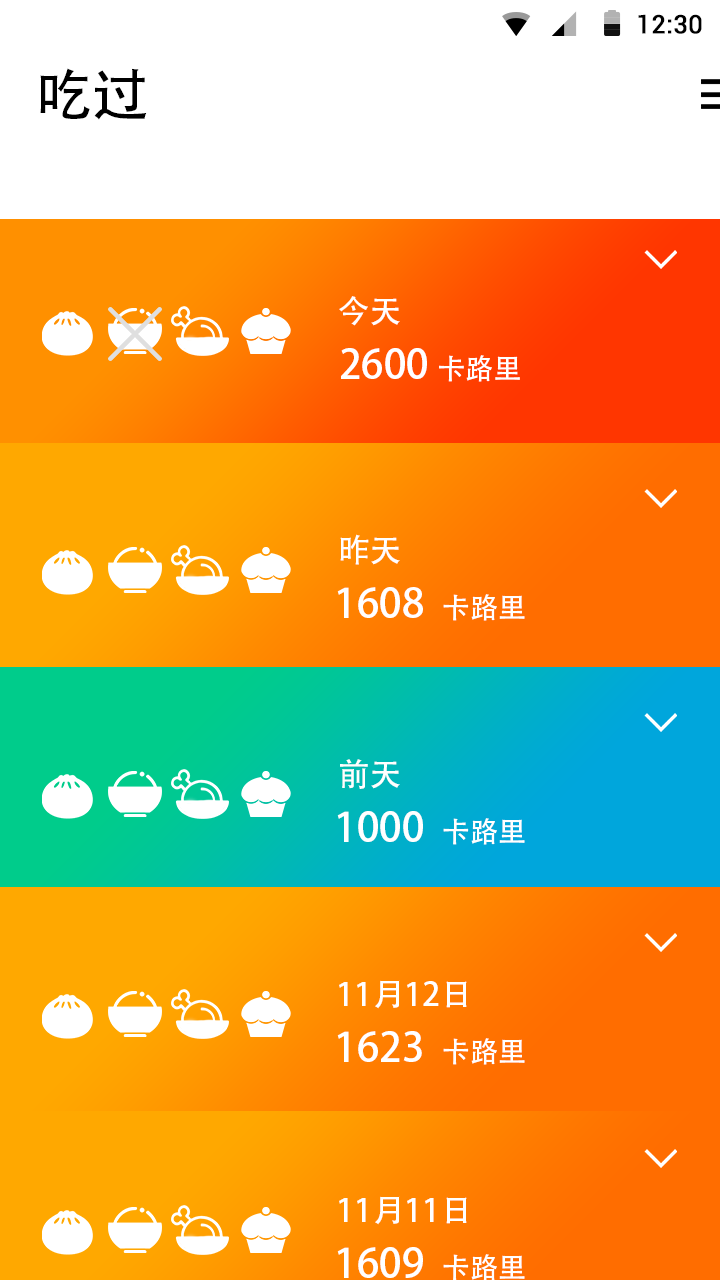
<style>
.page{position:relative;width:720px;height:1280px;background:#ffffff}
.page>*{position:absolute;margin:0}
.t1{font:25.4px "Roboto-Regular";color:#000000;font-weight:bold}
.t2{font:56px "AdobeHeitiStd-Regular";color:#000000}
.t3{font:32px "AdobeHeitiStd-Regular";color:#ffffff}
.t4{font:40px "AdobeHeitiStd-Regular";color:#ffffff}
.t5{font:28px "AdobeHeitiStd-Regular";color:#ffffff}
</style>
<div class="page">
<p class="t1" style="left:638px;top:14px;width:64px;height:20px">12:30</p>
<p class="t2" style="left:40px;top:68px;width:107px;height:52px">吃过</p>
<p class="t3" style="left:339px;top:296px;width:61px;height:30px">今天</p>
<p class="t4" style="left:341px;top:348px;width:179px;height:34px">2600 <span class="t5">卡路里</span></p>
<p class="t3" style="left:340px;top:534px;width:60px;height:31px">昨天</p>
<p class="t4" style="left:337px;top:587px;width:188px;height:34px">1608  <span class="t5">卡路里</span></p>
<p class="t3" style="left:340px;top:759px;width:60px;height:30px">前天</p>
<p class="t4" style="left:337px;top:811px;width:188px;height:34px">1000  <span class="t5">卡路里</span></p>
<p class="t3" style="left:339px;top:980px;width:128px;height:29px">11月12日</p>
<p class="t4" style="left:337px;top:1031px;width:188px;height:34px">1623  <span class="t5">卡路里</span></p>
<p class="t3" style="left:339px;top:1196px;width:128px;height:29px">11月11日</p>
<p class="t4" style="left:337px;top:1247px;width:188px;height:34px">1609  <span class="t5">卡路里</span></p>
</div>
